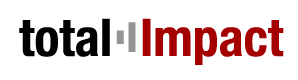
<style>
.page{position:relative;width:298px;height:80px;background:#ffffff}
.page>*{position:absolute;margin:0}
.t1{font:52px "HelveticaNeue-CondensedBold";color:#a50000}
.t2{font:52px "HelveticaNeue-CondensedBold";color:#000000}
.t3{font:18.7px "HelveticaNeue-CondensedBold";color:#959595;scale:2.61 1}
.t4{font:41.6px "HelveticaNeue-CondensedBold";color:#959595;scale:1.17 1}
</style>
<div class="page">
<p class="t1" style="left:19px;top:18px;width:265px;height:47px"><span class="t2">total </span><span class="t3">l</span><span class="t4">l </span>Impact</p>
</div>
